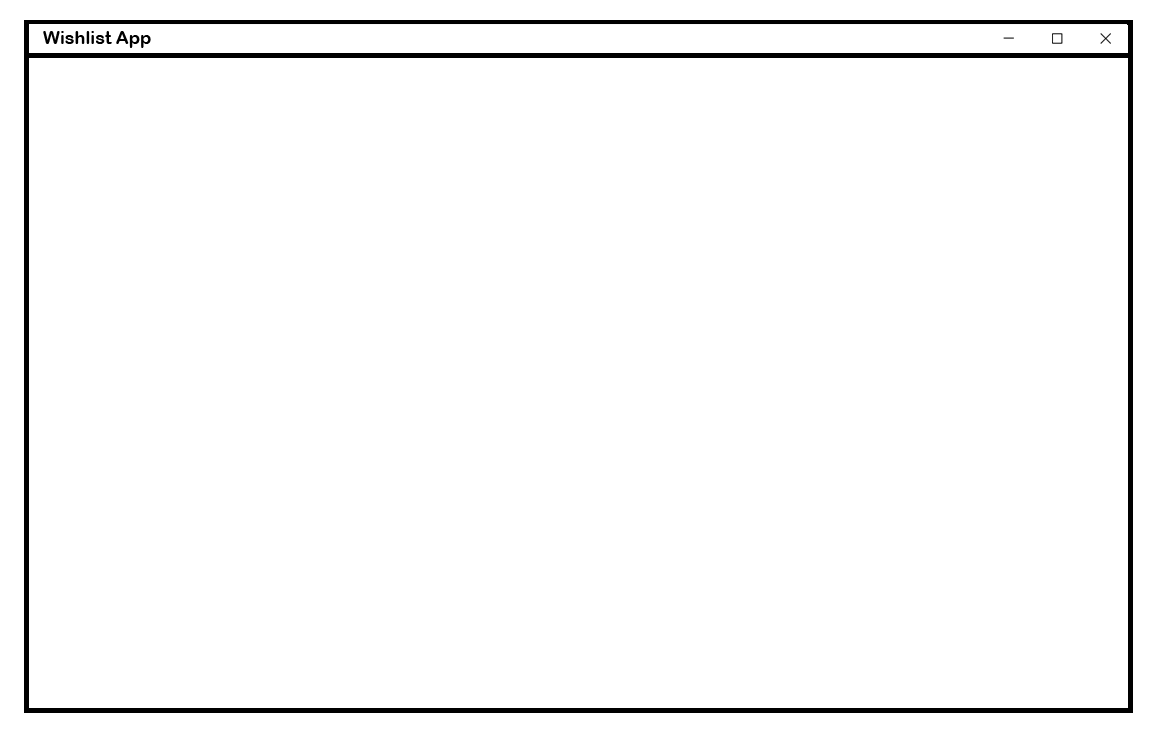
<style>
.page{position:relative;width:1170px;height:740px;background:#ffffff}
.page>*{position:absolute;margin:0}
.t1{font:18px "ArialRoundedMTBold";color:#000000}
</style>
<div class="page">
<p class="t1" style="left:43px;top:31px;width:108px;height:17px">Wishlist App</p>
</div>
